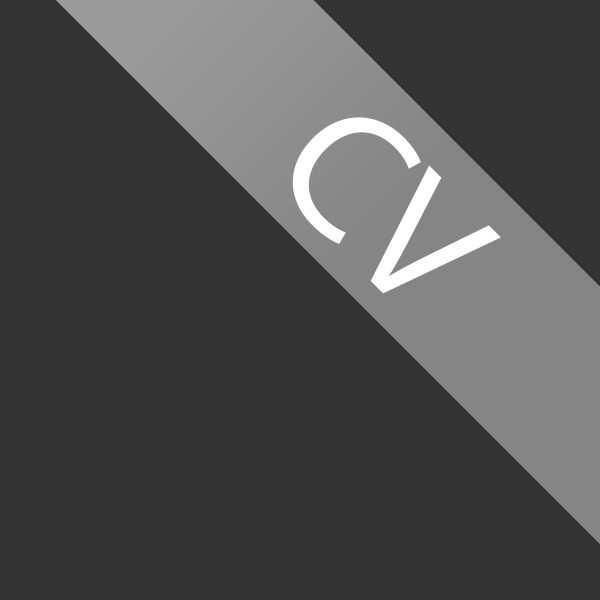
<style>
.page{position:relative;width:600px;height:600px;background:#333333}
.page>*{position:absolute;margin:0}
.t1{font:182.1px "MyriadPro-Regular";color:#ffffff}
</style>
<div class="page">
<p class="t1" style="left:292px;top:117px;width:209px;height:177px;rotate:45deg">CV</p>
</div>
